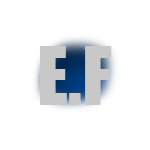
<style>
.page{position:relative;width:150px;height:150px;background:#ffffff}
.page>*{position:absolute;margin:0}
.t1{font:75px "Impact";color:#c9c8c8}
</style>
<div class="page">
<p class="t1" style="left:40px;top:46px;width:72px;height:59px">E.F</p>
</div>
